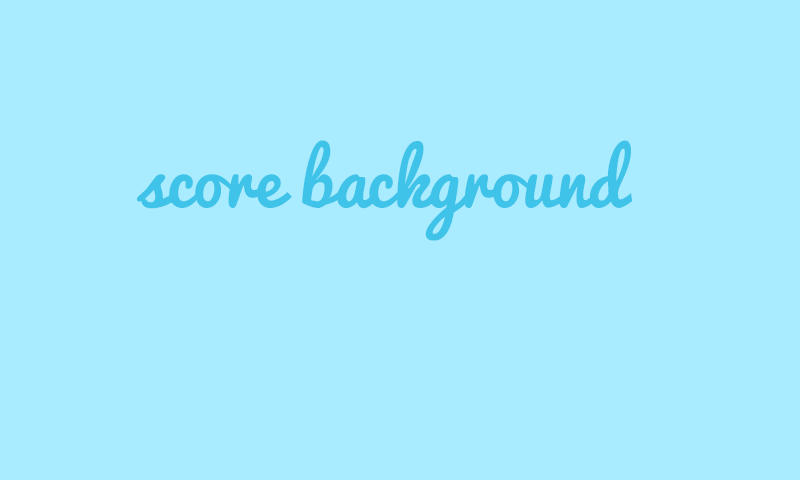
<style>
.page{position:relative;width:800px;height:480px;background:#aaecff}
.page>*{position:absolute;margin:0}
.t1{font:72px "Pacifico-Regular";color:#3fc3e9}
</style>
<div class="page">
<p class="t1" style="left:137px;top:140px;width:496px;height:101px">score background</p>
</div>
